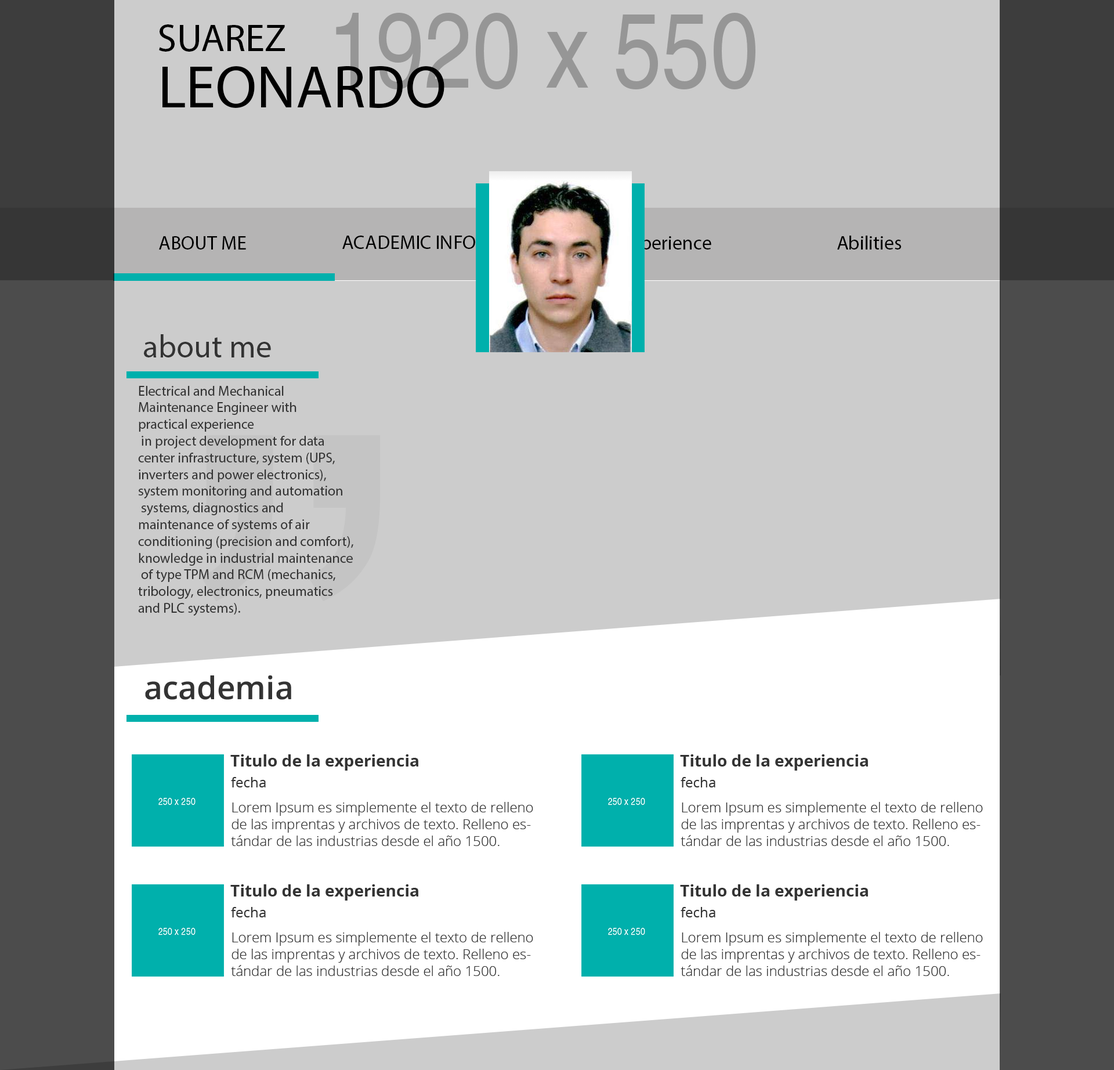
<style>
.page{position:relative;width:1114px;height:1070px;background:#cccccc}
.page>*{position:absolute;margin:0}
.t1{font:19.6px "MyriadPro-Regular";color:#000000}
.t2{font:30.1px "MyriadPro-Regular";color:#000000}
.t3{font:9.8px "MyriadPro-Regular";color:#000000}
.t4{font:16px "MyriadPro-Regular";color:#333333}
.t5{font:13.9px "MyriadPro-Regular";color:#333333}
.t6{font:16px "OpenSans-Semibold";color:#333333}
.t7{font:16.2px "OpenSans-Bold";color:#333333}
.t8{font:7px "OpenSans";color:#333333}
.t9{font:7px "OpenSans-Light";color:#333333}
</style>
<div class="page">
<p class="t1" style="left:159px;top:24px;width:126px;height:28px">SUAREZ</p>
<p class="t2" style="left:162px;top:66px;width:283px;height:42px">LEONARDO</p>
<p class="t3" style="left:159px;top:236px;width:87px;height:14px">ABOUT ME</p>
<p class="t3" style="left:342px;top:236px;width:210px;height:13px">ACADEMIC INFORMATION</p>
<p class="t3" style="left:624px;top:236px;width:88px;height:18px">Experience</p>
<p class="t3" style="left:837px;top:236px;width:64px;height:14px">Abilities</p>
<p class="t4" style="left:144px;top:334px;width:127px;height:23px">about me</p>
<p class="t5" style="left:138px;top:386px;width:215px;height:230px"><span class="t4"><br><br></span>Electrical and Mechanical <br>Maintenance Engineer with <br>practical experience<br> in project development for data <br>center infrastructure, system (UPS, <br>inverters and power electronics), <br>system monitoring and automation<br> systems, diagnostics and <br>maintenance of systems of air <br>conditioning (precision and comfort), <br>knowledge in industrial maintenance<br> of type TPM and RCM (mechanics, <br>tribology, electronics, pneumatics <br>and PLC systems).</p>
<p class="t6" style="left:145px;top:675px;width:146px;height:25px">academia</p>
<p class="t7" style="left:230px;top:754px;width:188px;height:17px">Titulo de la experiencia</p>
<p class="t7" style="left:680px;top:754px;width:188px;height:17px">Titulo de la experiencia</p>
<p class="t8" style="left:231px;top:777px;width:35px;height:11px">fecha</p>
<p class="t8" style="left:681px;top:777px;width:35px;height:11px">fecha</p>
<p class="t9" style="left:231px;top:802px;width:302px;height:44px">Lorem Ipsum es simplemente el texto de relleno de las imprentas y archivos de texto. Relleno estándar de las industrias desde el año 1500.</p>
<p class="t9" style="left:681px;top:802px;width:302px;height:44px">Lorem Ipsum es simplemente el texto de relleno de las imprentas y archivos de texto. Relleno estándar de las industrias desde el año 1500.</p>
<p class="t7" style="left:230px;top:884px;width:188px;height:17px">Titulo de la experiencia</p>
<p class="t7" style="left:680px;top:884px;width:188px;height:17px">Titulo de la experiencia</p>
<p class="t8" style="left:231px;top:907px;width:35px;height:11px">fecha</p>
<p class="t8" style="left:681px;top:907px;width:35px;height:11px">fecha</p>
<p class="t9" style="left:231px;top:932px;width:302px;height:44px">Lorem Ipsum es simplemente el texto de relleno de las imprentas y archivos de texto. Relleno estándar de las industrias desde el año 1500.</p>
<p class="t9" style="left:681px;top:932px;width:302px;height:44px">Lorem Ipsum es simplemente el texto de relleno de las imprentas y archivos de texto. Relleno estándar de las industrias desde el año 1500.</p>
</div>
